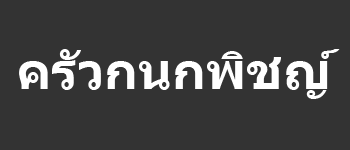
<style>
.page{position:relative;width:350px;height:150px;background:#333333}
.page>*{position:absolute;margin:0}
.t1{font:50px "Tahoma-Bold";color:#ffffff}
</style>
<div class="page">
<p class="t1" style="left:19px;top:49px;width:321px;height:50px">ครัวกนกพิชญ์</p>
</div>
